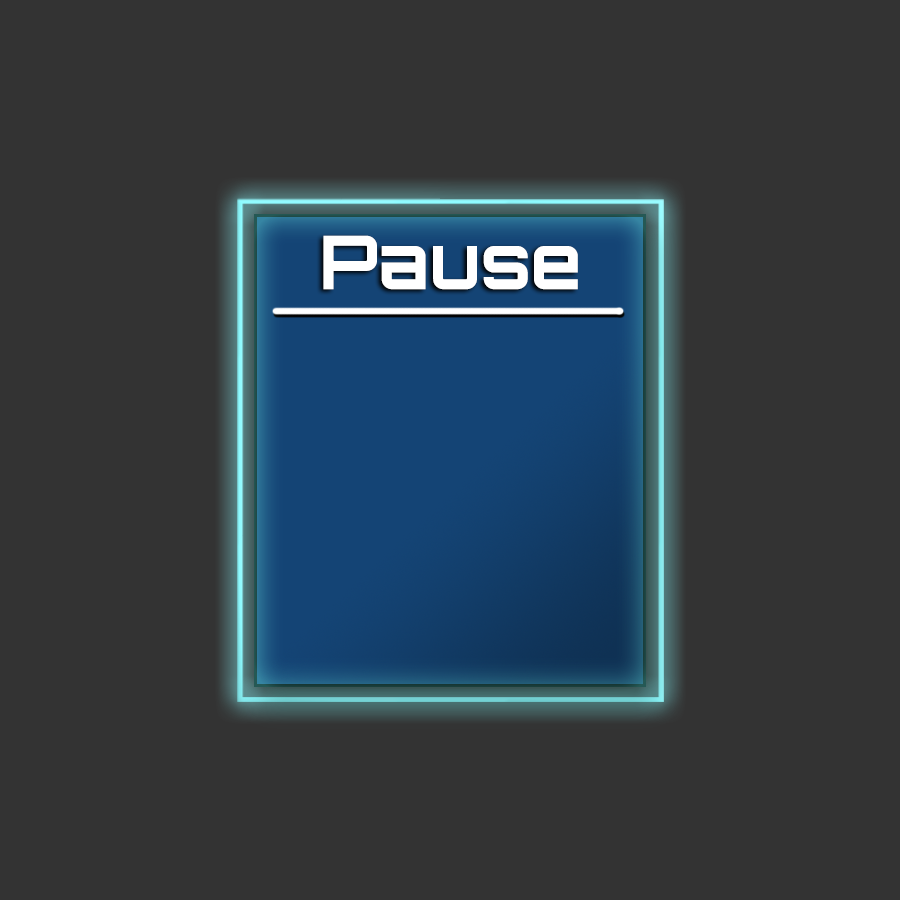
<style>
.page{position:relative;width:900px;height:900px;background:#333333}
.page>*{position:absolute;margin:0}
.t1{font:74px "Orbitron-Bold";color:#ffffff}
</style>
<div class="page">
<p class="t1" style="left:323px;top:235px;width:255px;height:55px">Pause</p>
</div>
